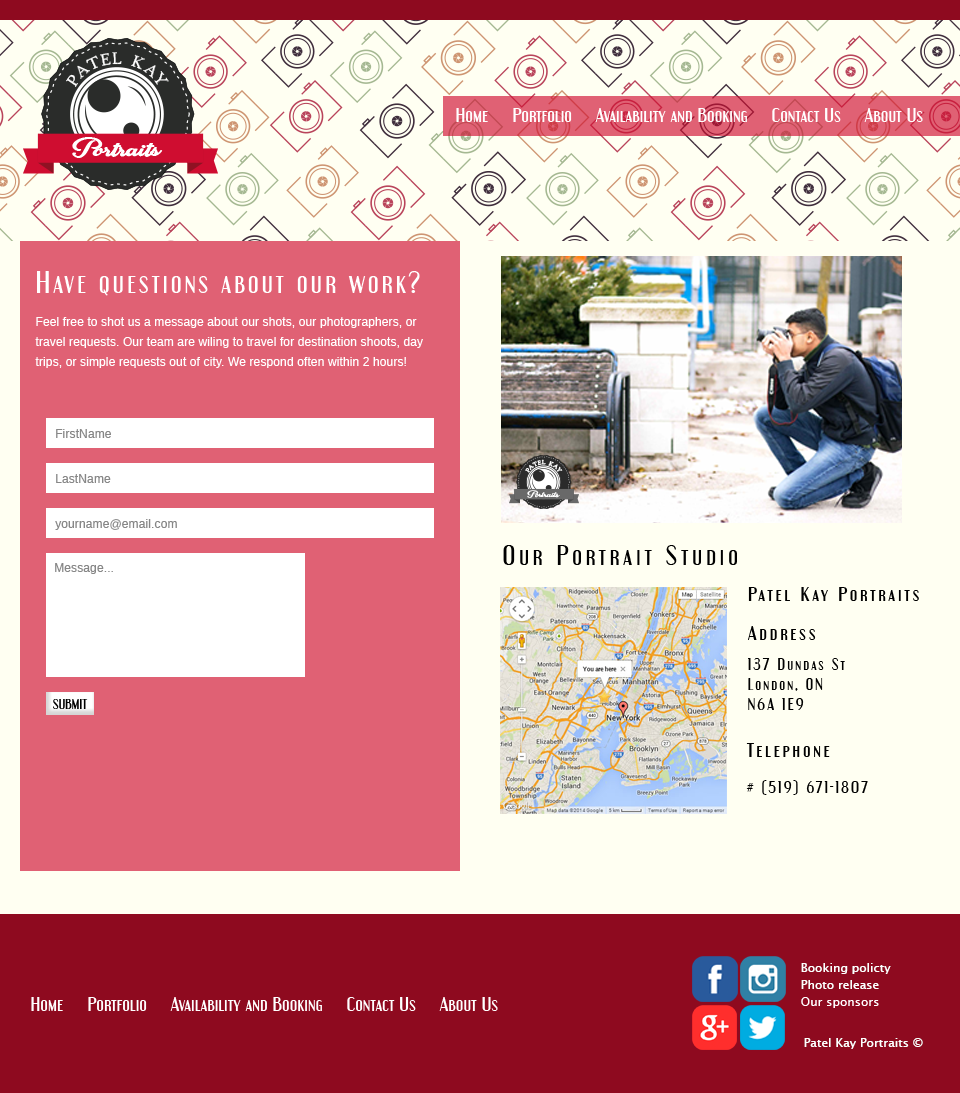
<style>
.page{position:relative;width:960px;height:1093px;background:#fffff2}
.page>*{position:absolute;margin:0}
.t1{font:18px "EngebrechtreRg-Regular";color:#ffffff}
.t2{font:27px "EngebrechtreRg-Regular";letter-spacing:0.095em;color:#ffffff}
.t3{font:12px/20px "Arimo";letter-spacing:0.01em;color:#ffffff}
.t4{font:12px "Arimo";letter-spacing:0.01em;color:#878787}
.t5{font:24px "EngebrechtreRg-Regular";letter-spacing:0.15em;color:#000000}
.t6{font:18px "EngebrechtreRg-Regular";letter-spacing:0.15em;color:#000000}
.t7{font:14px/20px "EngebrechtreRg-Regular";letter-spacing:0.15em;color:#000000}
.t8{font:18px/30px "EngebrechtreRg-Regular";letter-spacing:0.15em;color:#000000}
.t9{font:14px/30px "EngebrechtreRg-Regular";letter-spacing:0.15em;color:#000000}
.t10{font:12px "EngebrechtreRg-Regular";letter-spacing:0.01em;color:#000000}
.t11{font:14px/36px "EngebrechtreRg-Regular";letter-spacing:0.15em;color:#000000}
.t12{font:18px/36px "EngebrechtreRg-Regular";letter-spacing:0.15em;color:#000000}
.t13{font:12.1px "LucidaSansUnicode";color:#ffffff}
</style>
<div class="page">
<p class="t1" style="left:456px;top:108px;width:32px;height:14px">Home</p>
<p class="t1" style="left:513px;top:108px;width:59px;height:14px">Portfolio</p>
<p class="t1" style="left:595px;top:108px;width:152px;height:14px">Availability and Booking</p>
<p class="t1" style="left:772px;top:108px;width:69px;height:14px">Contact Us</p>
<p class="t1" style="left:864px;top:108px;width:59px;height:14px">About Us</p>
<p class="t2" style="left:37px;top:271px;width:383px;height:25px">Have questions about our work?</p>
<p class="t3" style="left:35px;top:317px;width:388px;height:51px">Feel free to shot us a message about our shots, our photographers, or travel requests. Our team are wiling to travel for destination shoots, day trips, or simple requests out of city. We respond often within 2 hours!</p>
<p class="t4" style="left:56px;top:429px;width:55px;height:9px">FirstName</p>
<p class="t4" style="left:56px;top:474px;width:55px;height:9px">LastName</p>
<p class="t4" style="left:55px;top:519px;width:122px;height:11px">yourname@email.com</p>
<p class="t5" style="left:503px;top:545px;width:234px;height:20px">Our Portrait Studio</p>
<p class="t4" style="left:55px;top:563px;width:58px;height:11px">Message...</p>
<p class="t6" style="left:748px;top:587px;width:171px;height:14px">Patel Kay Portraits</p>
<p class="t7" style="left:748px;top:626px;width:97px;height:84px"><span class="t8">Address<br></span><span class="t9">137 Dundas St<br></span>London, ON<br>N6A 1E9</p>
<p class="t10" style="left:53px;top:699px;width:35px;height:10px">SUBMIT</p>
<p class="t11" style="left:746px;top:743px;width:122px;height:52px"><span class="t12">Telephone<br></span># (519) 671-1807</p>
<p class="t13" style="left:801px;top:963px;width:90px;height:11px">Booking policty</p>
<p class="t13" style="left:801px;top:980px;width:78px;height:9px">Photo release agreement</p>
<p class="t1" style="left:31px;top:997px;width:32px;height:14px">Home</p>
<p class="t1" style="left:88px;top:997px;width:59px;height:14px">Portfolio</p>
<p class="t1" style="left:170px;top:997px;width:152px;height:14px">Availability and Booking</p>
<p class="t1" style="left:347px;top:997px;width:69px;height:14px">Contact Us</p>
<p class="t1" style="left:439px;top:997px;width:59px;height:14px">About Us</p>
<p class="t13" style="left:801px;top:997px;width:78px;height:11px">Our sponsors</p>
<p class="t13" style="left:804px;top:1038px;width:119px;height:11px">Patel Kay Portraits ©  2018</p>
</div>
